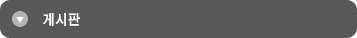
<style>
.page{position:relative;width:357px;height:38px;background:#585858}
.page>*{position:absolute;margin:0}
.t1{font:14px "Mroad";color:#ffffff;scale:0.9 1}
</style>
<div class="page">
<p class="t1" style="left:43px;top:13px;width:37px;height:13px">게시판</p>
</div>
